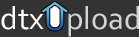
<style>
.page{position:relative;width:139px;height:37px;background:#333333}
.page>*{position:absolute;margin:0}
.t1{font:32.6px "Corbel";color:#d4d4d4}
.t2{font:32.6px "Corbel";color:#ffffff}
.t3{font:32.6px "Corbel";color:#154f9e}
.t4{font:32.6px "Corbel"}
</style>
<div class="page">
<p class="t1" style="left:1px;top:6px;width:138px;height:31px"><span class="t2">dtx</span><span class="t3">U</span>pload</p>
<p class="t4" style="left:46px;top:8px;width:18px;height:23px">U</p>
</div>
